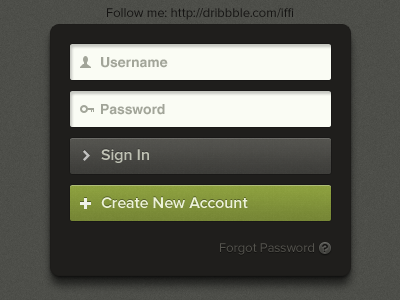
<style>
.page{position:relative;width:400px;height:300px;background:#1f1e1c}
.page>*{position:absolute;margin:0}
.t1{font:13px "ProximaNova-Regular";color:#141312}
.t2{font:14px "HelveticaLTStd-Bold";color:#a2a599}
.t3{font:16px "ProximaNova-Semibold";color:#bec0b4}
.t4{font:16px "ProximaNova-Semibold";color:#fbffed}
.t5{font:13px "ProximaNova-Regular";color:#55544e}
</style>
<div class="page">
<p class="t1" style="left:107px;top:8px;width:187px;height:12px">Follow me: http://dribbble.com/iffi</p>
<p class="t2" style="left:101px;top:57px;width:67px;height:11px">Username</p>
<p class="t2" style="left:101px;top:104px;width:64px;height:11px">Password</p>
<p class="t3" style="left:101px;top:149px;width:48px;height:14px">Sign In</p>
<p class="t4" style="left:101px;top:197px;width:147px;height:11px;opacity:0.88">Create New Account</p>
<p class="t5" style="left:220px;top:243px;width:94px;height:12px">Forgot Password</p>
</div>
